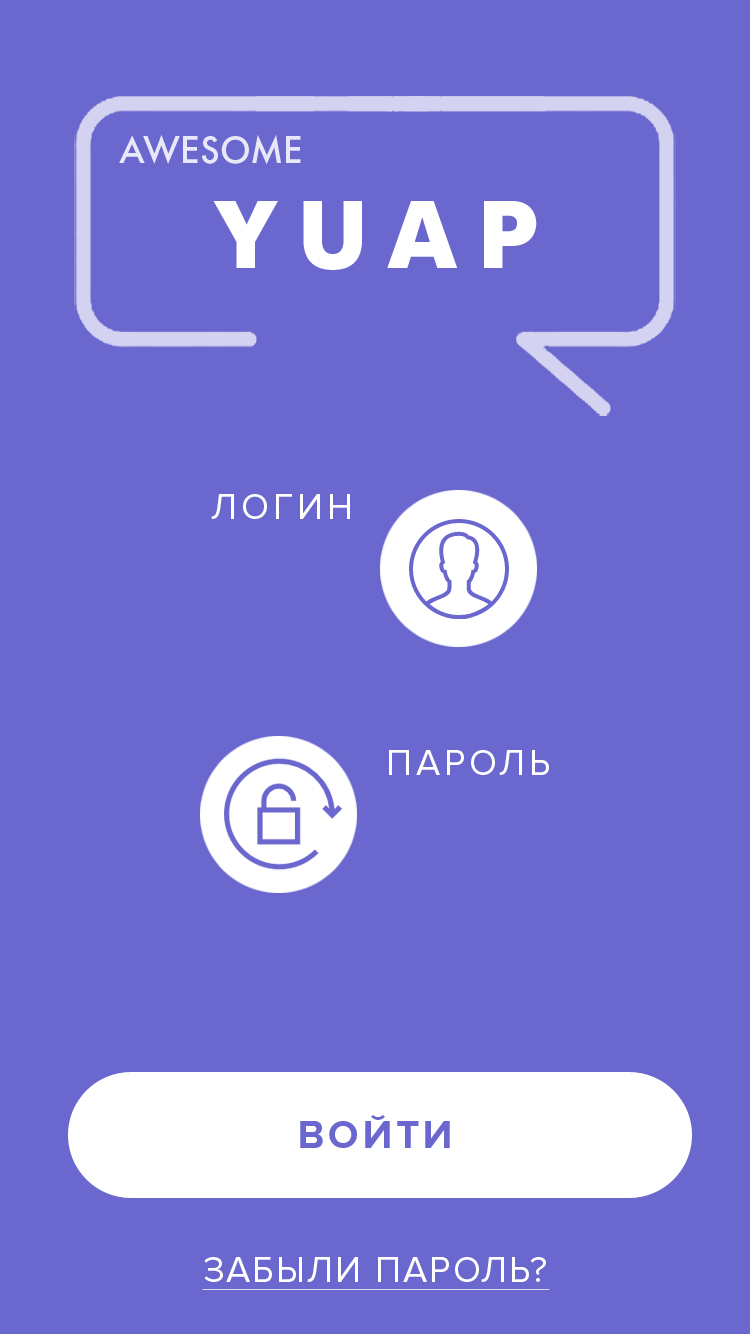
<style>
.page{position:relative;width:750px;height:1334px;background:#6a67ce}
.page>*{position:absolute;margin:0}
.t1{font:37.5px "FuturaFuturisC";color:#ffffff;text-transform:uppercase}
.t2{font:95px "FuturaFuturisC-Bold";letter-spacing:0.22em;color:#ffffff;text-transform:uppercase}
.t3{font:37px "ProximaNova-Regular";letter-spacing:0.095em;color:#ffffff;text-transform:uppercase}
.t4{font:40px "ProximaNova-Bold";letter-spacing:0.095em;color:#6a67ce;text-transform:uppercase}
.t5{font:37px "ProximaNova-Regular";letter-spacing:0.05em;color:#ffffff;text-transform:uppercase;text-decoration:underline}
</style>
<div class="page">
<p class="t1" style="left:119px;top:134px;width:182px;height:31px;opacity:0.85">awesome</p>
<p class="t2" style="left:213px;top:201px;width:324px;height:69px">Yuap</p>
<p class="t3" style="left:211px;top:494px;width:139px;height:25px">логин</p>
<p class="t3" style="left:389px;top:750px;width:160px;height:25px">пароль</p>
<p class="t4" style="left:300px;top:1115px;width:150px;height:33px">Войти</p>
<p class="t5" style="left:202px;top:1257px;width:348px;height:33px">Забыли пароль?</p>
</div>
